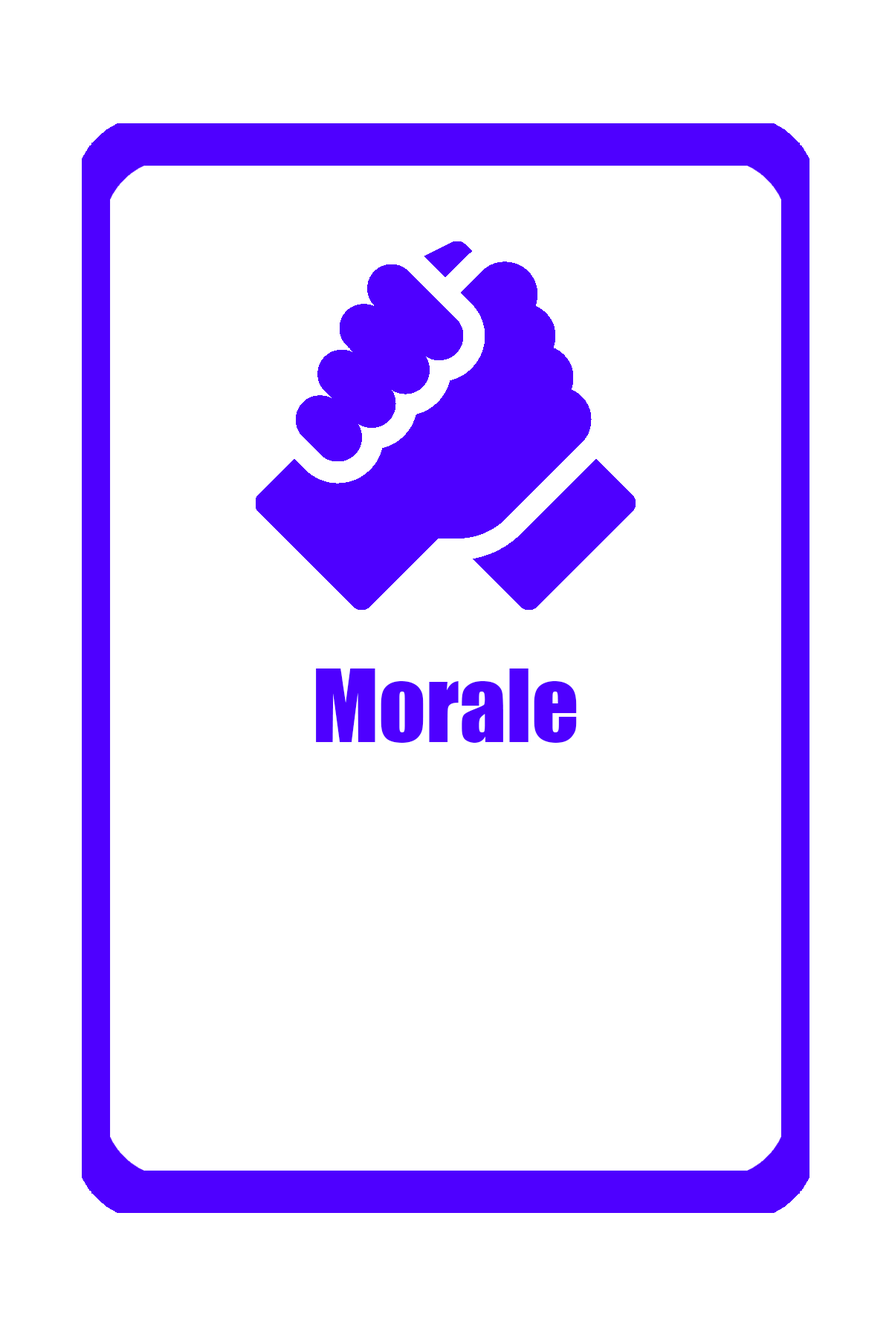
<style>
.page{position:relative;width:892px;height:1337px;background:#ffffff}
.page>*{position:absolute;margin:0}
.t1{font:92.9px "Impact";color:#4e00ff}
</style>
<div class="page">
<p class="t1" style="left:316px;top:669px;width:261px;height:74px">Morale</p>
</div>
